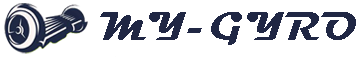
<style>
.page{position:relative;width:361px;height:57px;background:#ffffff}
.page>*{position:absolute;margin:0}
.t1{font:71px "Magneto-Bold";letter-spacing:0.05em;color:#202744}
</style>
<div class="page">
<p class="t1" style="left:100px;top:12px;width:256px;height:33px">MY-GYRO</p>
</div>
